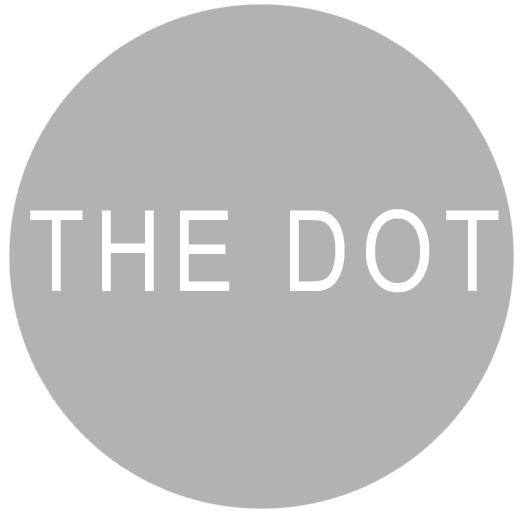
<style>
.page{position:relative;width:521px;height:512px;background:#b2b2b2}
.page>*{position:absolute;margin:0}
.t1{font:112.5px "ArialNarrow";letter-spacing:0.1em;color:#ffffff}
</style>
<div class="page">
<p class="t1" style="left:30px;top:209px;width:469px;height:84px">THE DOT</p>
</div>
